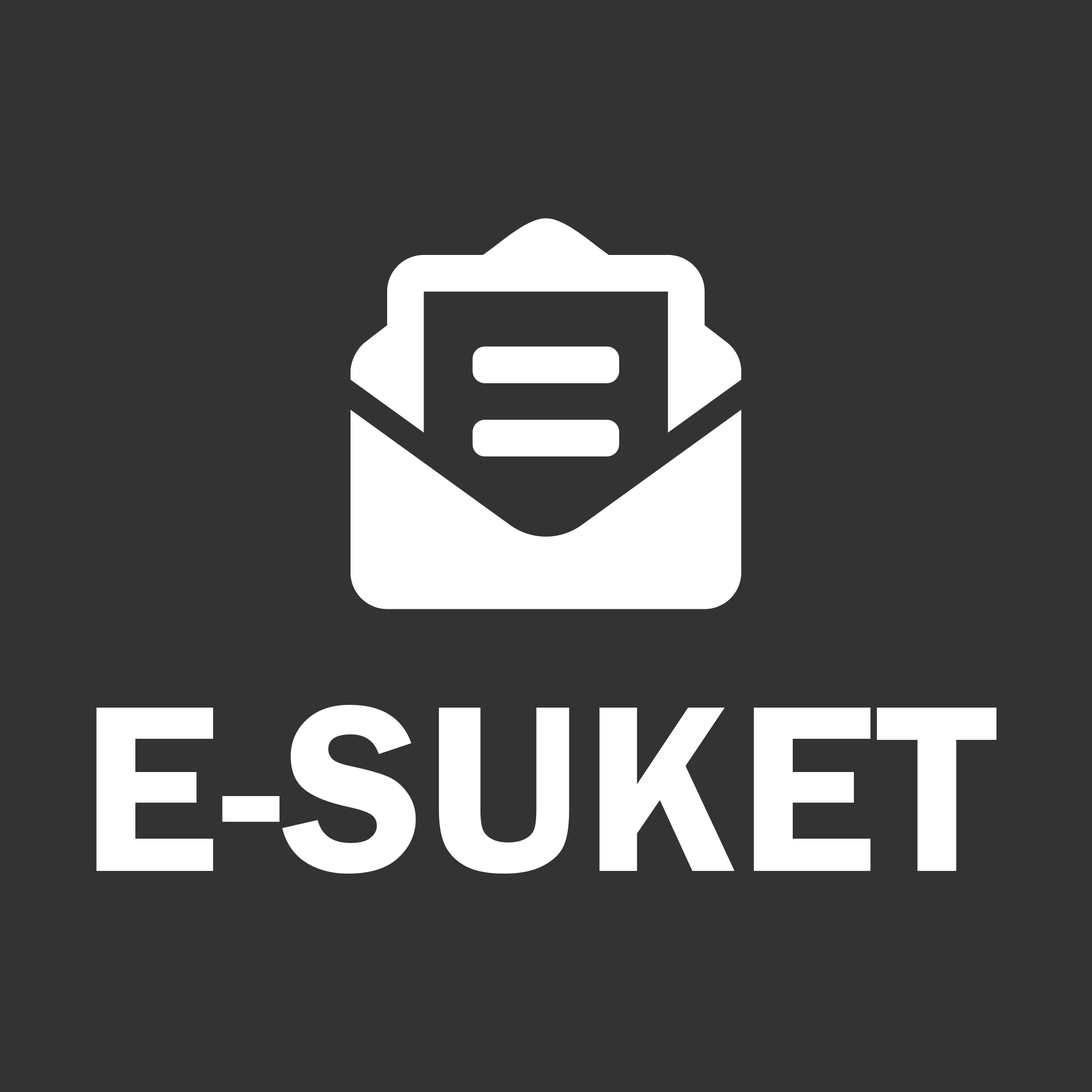
<style>
.page{position:relative;width:1092px;height:1092px;background:#333333}
.page>*{position:absolute;margin:0}
.t1{font:244.6px "FranklinGothic-Demi";color:#ffffff}
</style>
<div class="page">
<p class="t1" style="left:96px;top:705px;width:900px;height:169px">E-SUKET</p>
</div>
